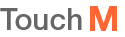
<style>
.page{position:relative;width:125px;height:37px;background:#ffffff}
.page>*{position:absolute;margin:0}
.t1{font:34.5px "HelveticaNeueLTPro-Bd";color:#ff6633}
.t2{font:30px "HelveticaNeueLTPro-Md";color:#666666}
</style>
<div class="page">
<p class="t1" style="left:90px;top:6px;width:27px;height:25px">M</p>
<p class="t2" style="left:0px;top:8px;width:82px;height:22px">Touch</p>
</div>
